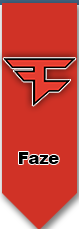
<style>
.page{position:relative;width:79px;height:229px;background:#d03226}
.page>*{position:absolute;margin:0}
.t1{font:16.7px "Arial-Black";letter-spacing:-0.01em;color:#000000}
</style>
<div class="page">
<p class="t1" style="left:19px;top:152px;width:40px;height:12px">Faze</p>
</div>
